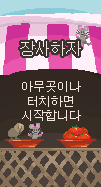
<style>
.page{position:relative;width:101px;height:187px}
.page>*{position:absolute;margin:0}
.t1{font:12px "DotumChe";color:#f4e6dc}
</style>
<div class="page">
<p class="t1" style="left:22px;top:81px;width:59px;height:40px;text-align:center">아무곳이나<br>터치하면<br>시작합니다</p>
</div>
